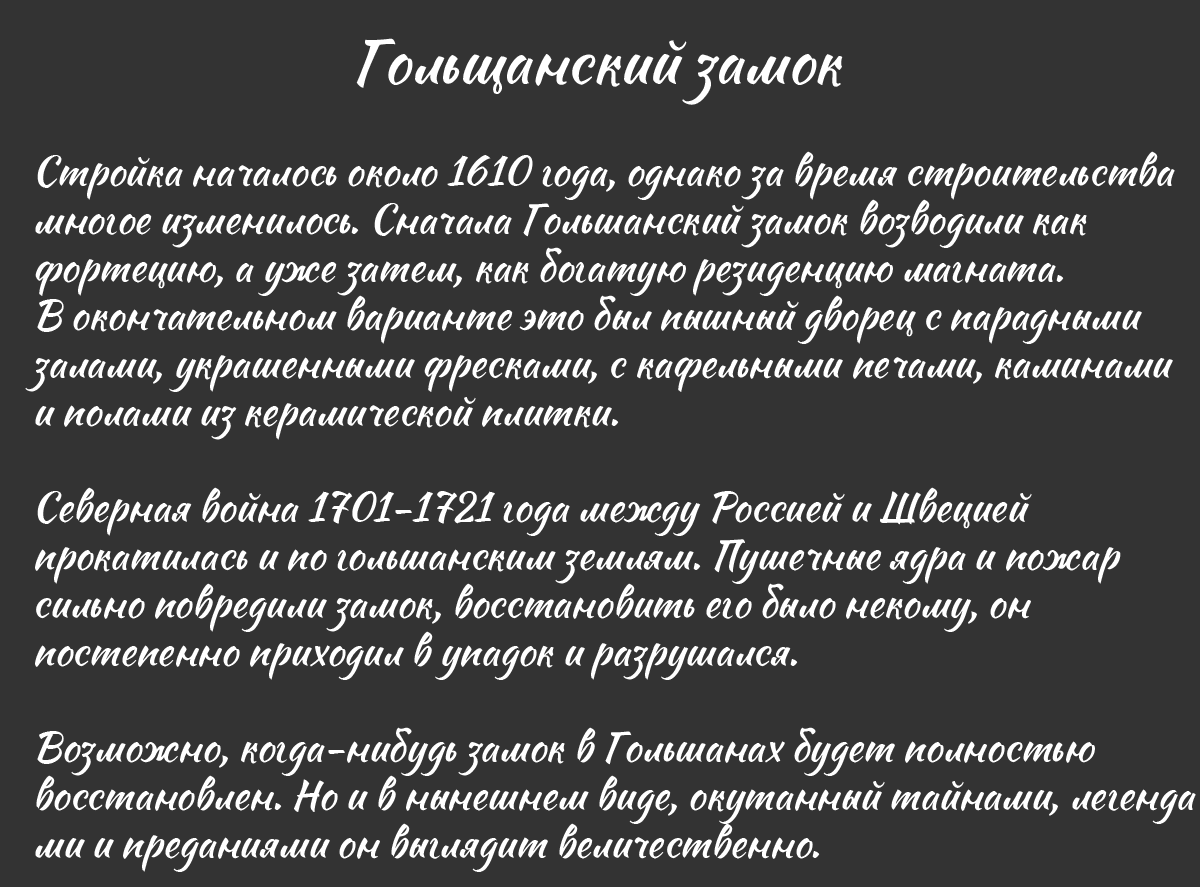
<style>
.page{position:relative;width:1200px;height:887px;background:#333333}
.page>*{position:absolute;margin:0}
.t1{font:60px "Sweet-Mavka-Script";color:#ffffff}
.t2{font:40px "Sweet-Mavka-Script";color:#ffffff}
</style>
<div class="page">
<p class="t1" style="left:356px;top:38px;width:487px;height:67px">Гольщанский замок</p>
<p class="t2" style="left:25px;top:151px;width:1171px;height:721px">Стройка началось около 1610 года, однако за время строительства <br>многое изменилось. Сначала Гольшанский замок возводили как <br>фортецию, а уже затем, как богатую резиденцию магната. <br>В окончательном варианте это был пышный дворец с парадными <br>залами, украшенными фресками, с кафельными печами, каминами <br>и полами из керамической плитки.<br><br>Северная война 1701-1721 года между Россией и Швецией <br>прокатилась и по гольшанским землям. Пушечные ядра и пожар <br>сильно повредили замок, восстановить его было некому, он <br>постепенно приходил в упадок и разрушался.<br><br>Возможно, когда-нибудь замок в Гольшанах будет полностью <br>восстановлен. Но и в нынешнем виде, окутанный тайнами, легенда<br>ми и преданиями он выглядит величественно.</p>
</div>
